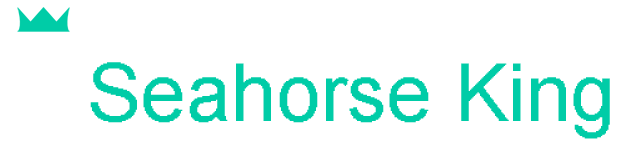
<style>
.page{position:relative;width:641px;height:150px;background:#ffffff}
.page>*{position:absolute;margin:0}
.t1{font:80px "Small Fonts";color:#00cca7}
</style>
<div class="page">
<p class="t1" style="left:90px;top:62px;width:520px;height:77px">Seahorse King</p>
</div>
